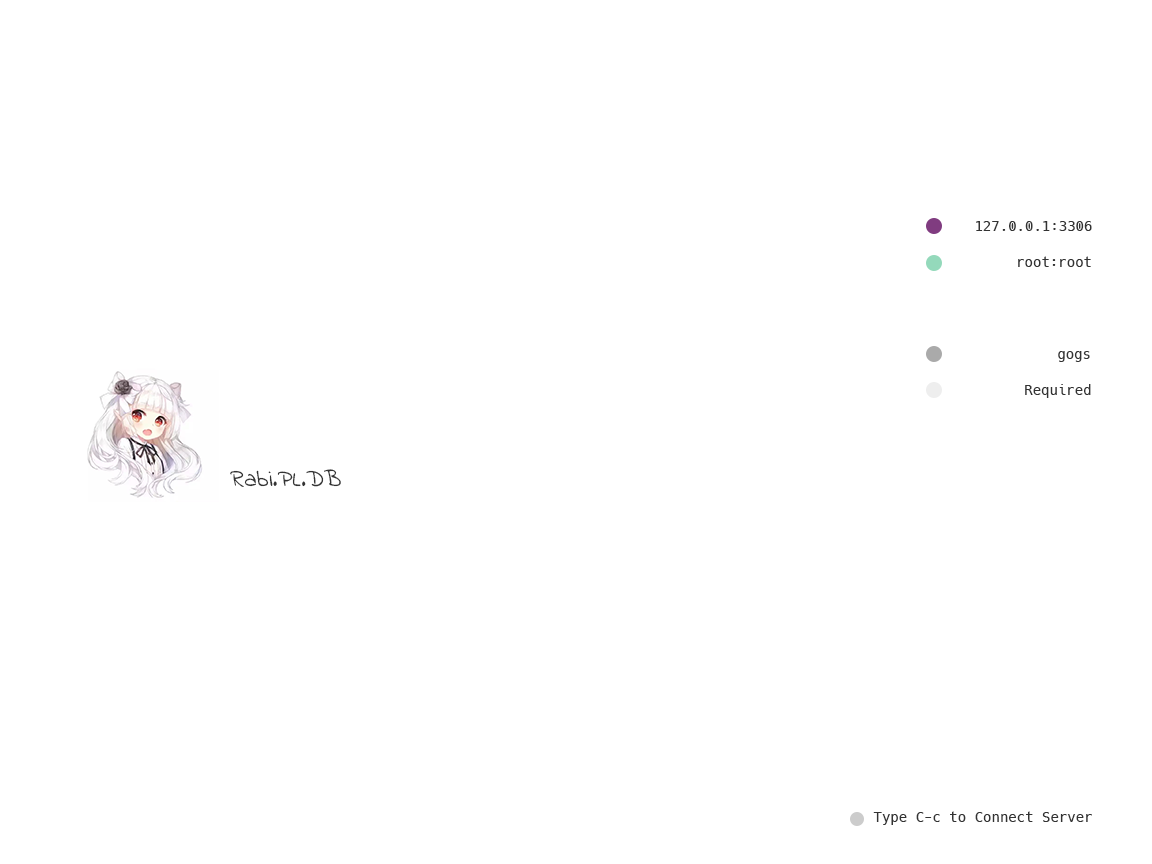
<style>
.page{position:relative;width:1152px;height:864px;background:#ffffff}
.page>*{position:absolute;margin:0}
.t1{font:14px "Hack-Regular";color:#333333}
.t2{font:24px "IndieFlower";color:#333333}
</style>
<div class="page">
<p class="t1" style="left:976px;top:221px;width:116px;height:10px">127.0.0.1:3306</p>
<p class="t1" style="left:1018px;top:256px;width:73px;height:11px">root:root</p>
<p class="t1" style="left:1058px;top:351px;width:32px;height:11px">gogs</p>
<p class="t1" style="left:1025px;top:384px;width:66px;height:14px">Required</p>
<p class="t2" style="left:230px;top:469px;width:111px;height:18px">Rabi.PL.DB</p>
<p class="t1" style="left:873px;top:811px;width:219px;height:14px">Type C-c to Connect Server</p>
</div>
